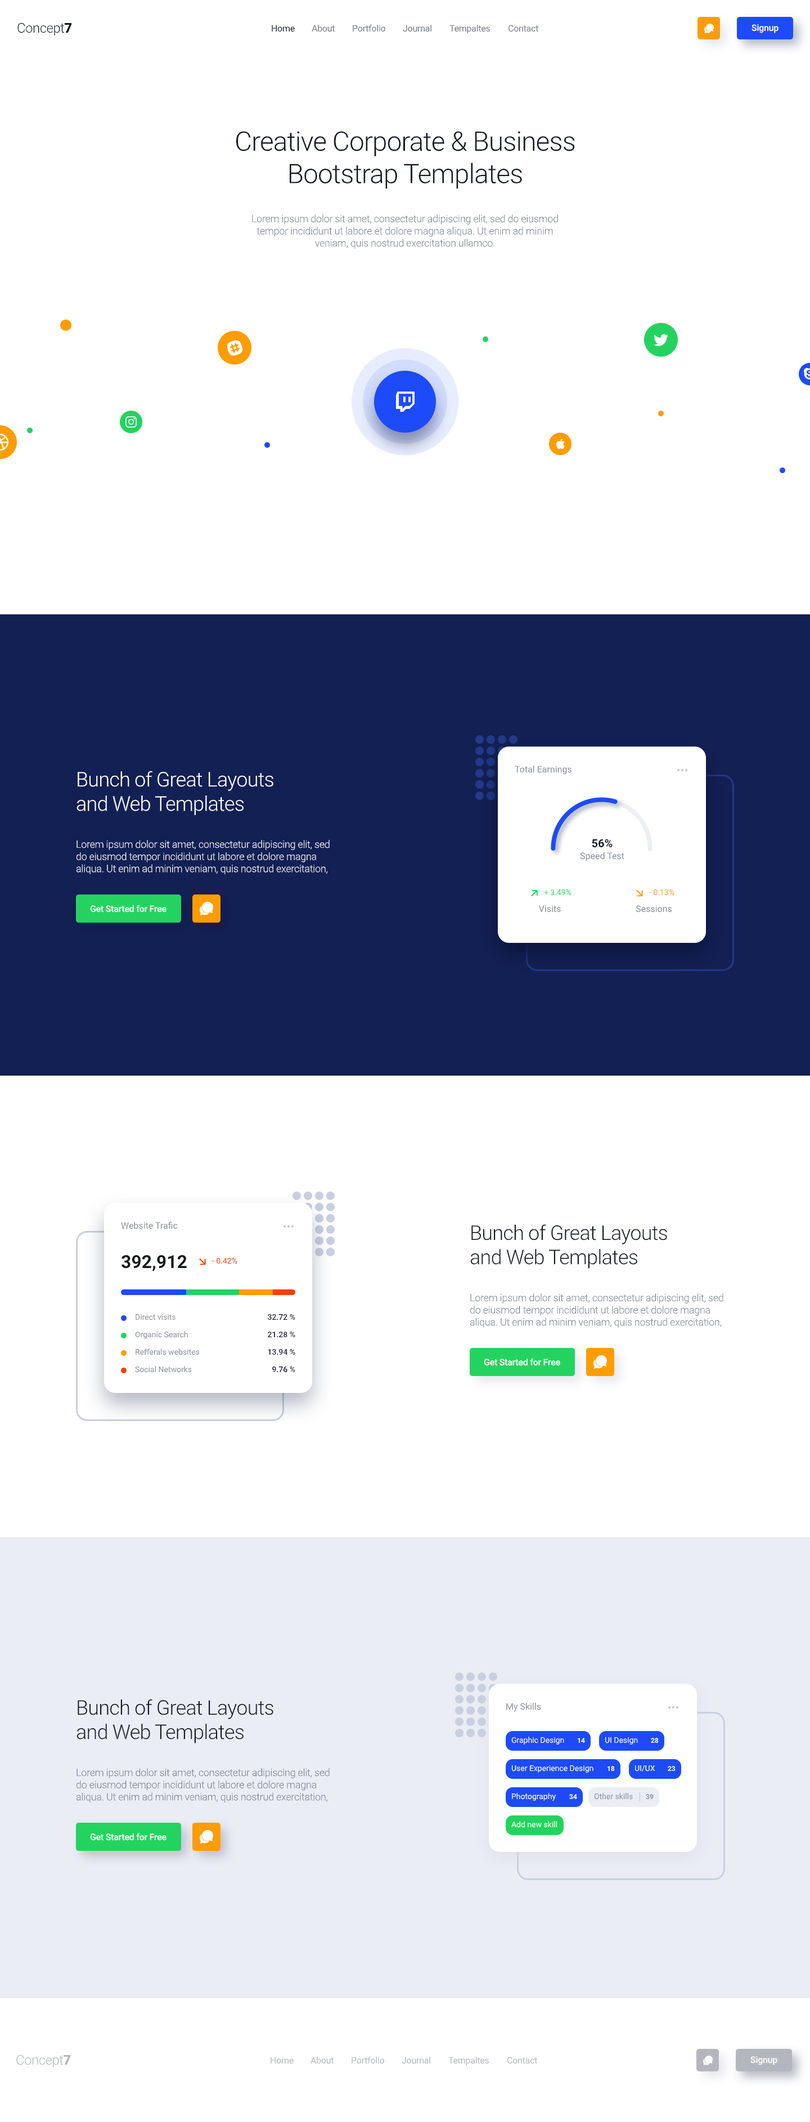
<style>
.page{position:relative;width:810px;height:2122px;background:#ffffff}
.page>*{position:absolute;margin:0}
.t1{font:13.5px "Roboto-Light";letter-spacing:-0.021em;color:#111723}
.t2{font:13.5px "Roboto-Black";letter-spacing:-0.021em;color:#111723}
.t3{font:9px "Roboto-Regular";letter-spacing:-0.016em;color:#111723}
.t4{font:9px "Roboto-Regular";letter-spacing:-0.016em;color:#717884}
.t5{font:9px "Roboto-Medium";letter-spacing:-0.016em;color:#ffffff}
.t6{font:27px "Roboto-Light";letter-spacing:-0.021em;color:#111723}
.t7{font:10.1px "Roboto-Light";letter-spacing:-0.014em;color:#717884}
.t8{font:20.2px "Roboto-Light";letter-spacing:-0.021em;color:#ffffff}
.t9{font:9px "Roboto-Regular";color:#858997}
.t10{font:10.1px "Roboto-Light";letter-spacing:-0.014em;color:#ffffff}
.t11{font:11.2px "Roboto-Bold";color:#141821}
.t12{font:7.9px "Roboto-Regular";color:#24d35f}
.t13{font:7.9px "Roboto-Regular";color:#ff9d00}
.t14{font:20.2px "Roboto-Light";letter-spacing:-0.021em;color:#111723}
.t15{font:18px "Roboto-Bold";color:#15181a}
.t16{font:7.9px "Roboto-Regular";color:#f64000}
.t17{font:7.9px "Roboto-Regular";color:#858997}
.t18{font:7.9px "Roboto-Medium";color:#141821}
.t19{font:7.9px "Roboto-Regular";color:#ffffff}
.t20{font:6.8px "Roboto-Bold";color:#ffffff}
.t21{font:6.8px "Roboto-Bold";color:#858997}
.t22{font:13.5px "Roboto-Light";letter-spacing:-0.021em;color:#b3b7bd}
.t23{font:13.5px "Roboto-Black";letter-spacing:-0.021em;color:#b3b7bd}
.t24{font:9px "Roboto-Regular";letter-spacing:-0.016em;color:#b3b7bd}
</style>
<div class="page">
<p class="t1" style="left:17px;top:22px;width:55px;height:13px">Concept<span class="t2">7</span></p>
<p class="t3" style="left:272px;top:25px;width:23px;height:7px">Home</p>
<p class="t4" style="left:312px;top:25px;width:23px;height:7px">About</p>
<p class="t4" style="left:353px;top:24px;width:32px;height:8px">Portfolio</p>
<p class="t4" style="left:403px;top:25px;width:28px;height:7px">Journal</p>
<p class="t4" style="left:449px;top:25px;width:41px;height:9px">Tempaltes</p>
<p class="t4" style="left:508px;top:25px;width:30px;height:7px">Contact</p>
<p class="t5" style="left:752px;top:24px;width:26px;height:9px">Signup</p>
<p class="t6" style="left:236px;top:131px;width:339px;height:58px;text-align:center">Creative Corporate &amp; Business<br>Bootstrap Templates</p>
<p class="t7" style="left:252px;top:214px;width:306px;height:35px;text-align:center">Lorem ipsum dolor sit amet, consectetur adipiscing elit, sed do eiusmod tempor incididunt ut labore et dolore magna aliqua. Ut enim ad minim veniam, quis nostrud exercitation ullamco.</p>
<p class="t8" style="left:76px;top:771px;width:197px;height:44px">Bunch of Great Layouts<br>and Web Templates</p>
<p class="t9" style="left:515px;top:766px;width:57px;height:9px">Total Earnings</p>
<p class="t10" style="left:76px;top:840px;width:254px;height:34px">Lorem ipsum dolor sit amet, consectetur adipiscing elit, sed do eiusmod tempor incididunt ut labore et dolore magna aliqua. Ut enim ad minim veniam, quis nostrud exercitation,</p>
<p class="t11" style="left:592px;top:839px;width:21px;height:9px">56%</p>
<p class="t9" style="left:580px;top:852px;width:44px;height:9px">Speed Test</p>
<p class="t12" style="left:544px;top:889px;width:28px;height:7px">+ 3.49%</p>
<p class="t13" style="left:649px;top:889px;width:25px;height:7px">- 0.13%</p>
<p class="t5" style="left:90px;top:904px;width:76px;height:8px">Get Started for Free</p>
<p class="t9" style="left:538px;top:905px;width:23px;height:7px">Visits</p>
<p class="t9" style="left:636px;top:905px;width:36px;height:7px">Sessions</p>
<p class="t9" style="left:121px;top:1221px;width:57px;height:8px">Website Trafic</p>
<p class="t14" style="left:470px;top:1224px;width:197px;height:44px">Bunch of Great Layouts<br>and Web Templates</p>
<p class="t15" style="left:122px;top:1254px;width:65px;height:17px">392,912</p>
<p class="t16" style="left:212px;top:1257px;width:25px;height:7px">- 0.42%</p>
<p class="t7" style="left:470px;top:1293px;width:253px;height:35px">Lorem ipsum dolor sit amet, consectetur adipiscing elit, sed do eiusmod tempor incididunt ut labore et dolore magna aliqua. Ut enim ad minim veniam, quis nostrud exercitation,</p>
<p class="t17" style="left:136px;top:1313px;width:40px;height:7px">Direct visits</p>
<p class="t18" style="left:268px;top:1313px;width:27px;height:7px">32.72 %</p>
<p class="t17" style="left:135px;top:1331px;width:53px;height:8px">Organic Search</p>
<p class="t18" style="left:268px;top:1331px;width:27px;height:7px">21.28 %</p>
<p class="t17" style="left:136px;top:1348px;width:64px;height:7px">Refferals websites</p>
<p class="t18" style="left:268px;top:1348px;width:27px;height:7px">13.94 %</p>
<p class="t5" style="left:484px;top:1358px;width:76px;height:8px">Get Started for Free</p>
<p class="t17" style="left:135px;top:1366px;width:57px;height:6px">Social Networks</p>
<p class="t18" style="left:272px;top:1366px;width:23px;height:6px">9.76 %</p>
<p class="t14" style="left:76px;top:1699px;width:197px;height:44px">Bunch of Great Layouts<br>and Web Templates</p>
<p class="t9" style="left:506px;top:1703px;width:35px;height:9px">My Skills</p>
<p class="t19" style="left:511px;top:1736px;width:53px;height:8px">Graphic Design</p>
<p class="t20" style="left:577px;top:1738px;width:8px;height:5px">14</p>
<p class="t19" style="left:605px;top:1736px;width:33px;height:8px">UI Design</p>
<p class="t20" style="left:651px;top:1738px;width:8px;height:5px">28</p>
<p class="t7" style="left:76px;top:1768px;width:254px;height:34px">Lorem ipsum dolor sit amet, consectetur adipiscing elit, sed do eiusmod tempor incididunt ut labore et dolore magna aliqua. Ut enim ad minim veniam, quis nostrud exercitation,</p>
<p class="t19" style="left:511px;top:1765px;width:82px;height:7px">User Experience Design</p>
<p class="t20" style="left:607px;top:1766px;width:8px;height:5px">18</p>
<p class="t19" style="left:634px;top:1765px;width:21px;height:6px">UI/UX</p>
<p class="t20" style="left:668px;top:1766px;width:8px;height:5px">23</p>
<p class="t19" style="left:512px;top:1793px;width:44px;height:8px">Photography</p>
<p class="t20" style="left:569px;top:1794px;width:8px;height:5px">34</p>
<p class="t17" style="left:594px;top:1793px;width:39px;height:6px">Other skills</p>
<p class="t21" style="left:646px;top:1794px;width:8px;height:5px">39</p>
<p class="t19" style="left:511px;top:1821px;width:46px;height:7px">Add new skill</p>
<p class="t5" style="left:90px;top:1833px;width:76px;height:7px">Get Started for Free</p>
<p class="t22" style="left:16px;top:2054px;width:55px;height:13px">Concept<span class="t23">7</span></p>
<p class="t24" style="left:271px;top:2056px;width:23px;height:8px">Home</p>
<p class="t24" style="left:310px;top:2056px;width:24px;height:8px">About</p>
<p class="t24" style="left:352px;top:2056px;width:32px;height:8px">Portfolio</p>
<p class="t24" style="left:402px;top:2056px;width:28px;height:8px">Journal</p>
<p class="t24" style="left:448px;top:2056px;width:41px;height:10px">Tempaltes</p>
<p class="t24" style="left:507px;top:2056px;width:30px;height:8px">Contact</p>
<p class="t5" style="left:750px;top:2056px;width:27px;height:9px">Signup</p>
</div>
